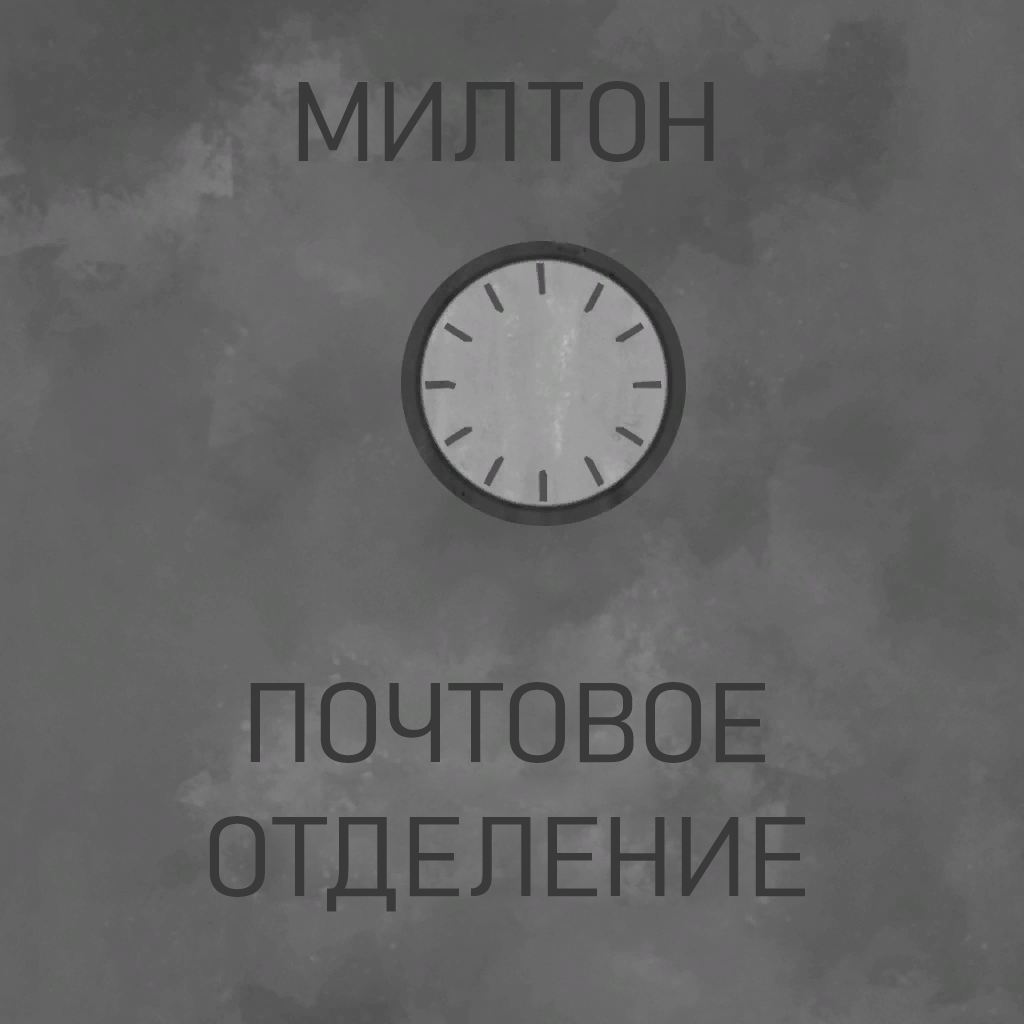
<style>
.page{position:relative;width:1024px;height:1024px}
.page>*{position:absolute;margin:0}
.t1{font:111.4px "Bahnschrift-LightSemiCondensed";color:#393a39;scale:1.16 1}
</style>
<div class="page">
<p class="t1" style="left:298px;top:81px;width:416px;height:81px">МИЛТОН</p>
<p class="t1" style="left:209px;top:682px;width:596px;height:230px;text-align:center">ПОЧТОВОЕ<br>ОТДЕЛЕНИЕ</p>
</div>
